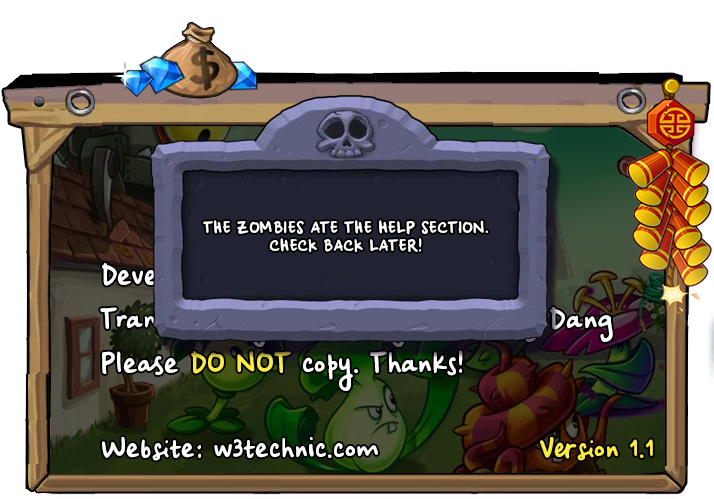
<style>
.page{position:relative;width:714px;height:499px;background:#ffffff}
.page>*{position:absolute;margin:0}
.t1{font:16.2px/18.1px "iCielBeCool-Regular";letter-spacing:0.01em;color:#ffffff}
.t2{font:27.7px/44px "iCielBeCool-Regular";letter-spacing:0.01em}
.t3{font:26.3px "iCielBeCool-Regular";letter-spacing:0.01em;color:#ffffff}
.t4{font:26.3px "iCielBeCool-Regular";letter-spacing:0.01em;color:#fbeb43}
</style>
<div class="page">
<p class="t1" style="left:203px;top:220px;width:285px;height:33px;text-align:center">THE ZOMBIES ATE THE HELP SECTION.<br>CHECK BACK LATER!</p>
<p class="t2" style="left:100px;top:263px;width:513px;height:128px">Developer: PAK<br>Translated by: GraceHuynh &amp; Hang Dang<br>Please DO NOT copy. Thanks!</p>
<p class="t3" style="left:102px;top:436px;width:276px;height:25px">Website: w3technic.com</p>
<p class="t4" style="left:540px;top:437px;width:113px;height:24px">Version 1.1</p>
</div>
